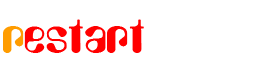
<style>
.page{position:relative;width:279px;height:68px;background:#ffffff}
.page>*{position:absolute;margin:0}
.t1{font:48px "Asimov";color:#ff0000}
.t2{font:48px "Asimov";color:#ff9c00}
</style>
<div class="page">
<p class="t1" style="left:3px;top:19px;width:141px;height:34px"><span class="t2">r</span>estart</p>
</div>
